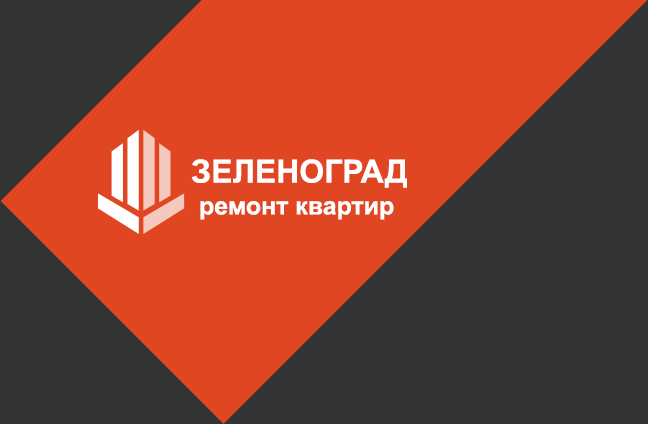
<style>
.page{position:relative;width:648px;height:424px;background:#333333}
.page>*{position:absolute;margin:0}
.t1{font:31.9px "Arial-BoldMT";color:#ffffff}
.t2{font:24.9px "Arial-BoldMT";color:#ffffff}
</style>
<div class="page">
<p class="t1" style="left:191px;top:159px;width:216px;height:29px">ЗЕЛЕНОГРАД</p>
<p class="t2" style="left:200px;top:201px;width:194px;height:19px">ремонт квартир</p>
</div>
